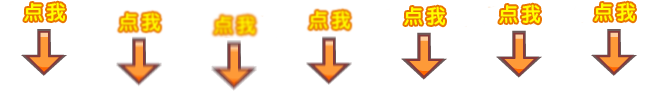
<style>
.page{position:relative;width:665px;height:95px;background:#ffffff}
.page>*{position:absolute;margin:0}
.t1{font:20px "JCuYuan";letter-spacing:0.15em;color:#fffe00}
</style>
<div class="page">
<p class="t1" style="left:24px;top:2px;width:41px;height:20px">点我</p>
<p class="t1" style="left:404px;top:6px;width:41px;height:20px">点我</p>
<p class="t1" style="left:499px;top:4px;width:41px;height:20px">点我</p>
<p class="t1" style="left:594px;top:2px;width:41px;height:20px">点我</p>
</div>
